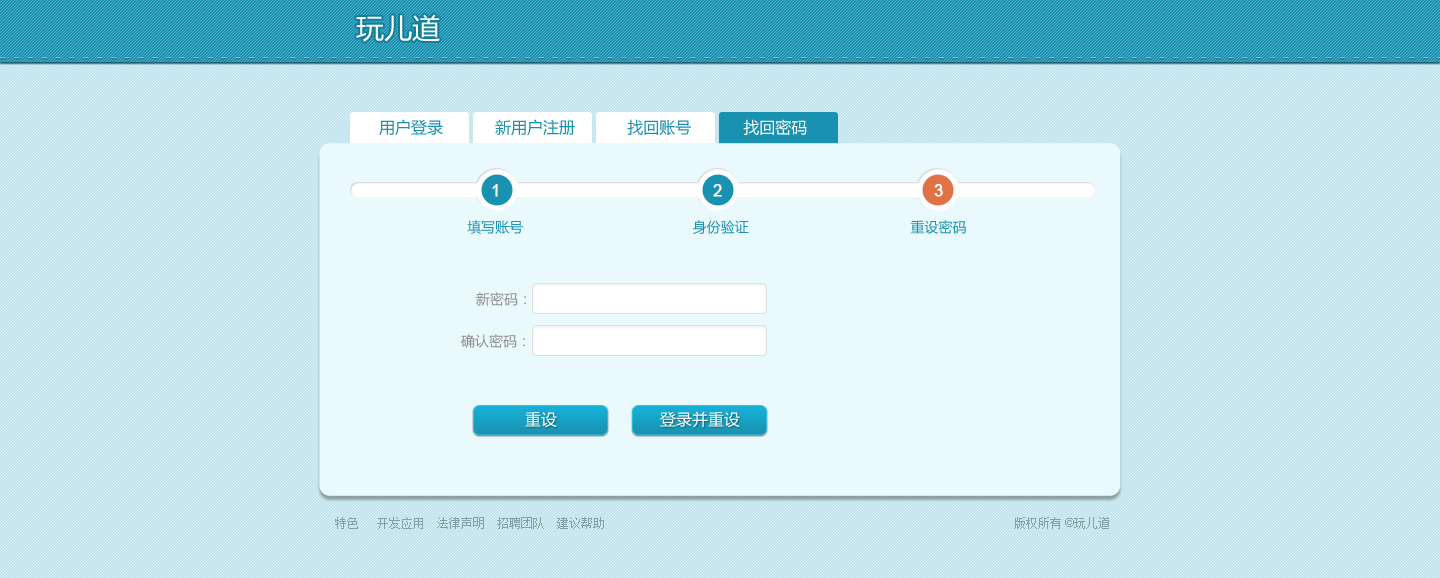
<style>
.page{position:relative;width:1440px;height:578px;background:#bfe4ed}
.page>*{position:absolute;margin:0}
.t1{font:28px "MicrosoftYaHei";color:#ffffff}
.t2{font:16px "MicrosoftYaHei";color:#1992b1}
.t3{font:16px "MicrosoftYaHei";color:#ffffff}
.t4{font:16px "ArialMT";color:#ffffff;font-weight:bold}
.t5{font:14px "MicrosoftYaHei";color:#1992b1}
.t6{font:14px "MicrosoftYaHei";color:#8e8e8e}
.t7{font:12px "SimSun";color:#849fa6}
.t8{font:12px "ArialMT";color:#849fa6}
</style>
<div class="page">
<p class="t1" style="left:356px;top:14px;width:84px;height:28px">玩儿道</p>
<p class="t2" style="left:379px;top:119px;width:428px;height:17px">用户登录           新用户注册           找回账号           <span class="t3">找回密码</span></p>
<p class="t4" style="left:492px;top:184px;width:6px;height:13px">1</p>
<p class="t4" style="left:713px;top:184px;width:9px;height:13px">2</p>
<p class="t4" style="left:934px;top:184px;width:9px;height:13px">3</p>
<p class="t5" style="left:467px;top:220px;width:499px;height:14px">填写账号                                         身份验证                                       重设密码</p>
<p class="t6" style="left:476px;top:292px;width:50px;height:14px">新密码：</p>
<p class="t6" style="left:461px;top:334px;width:64px;height:14px">确认密码：</p>
<p class="t3" style="left:525px;top:412px;width:32px;height:16px">重设</p>
<p class="t3" style="left:660px;top:411px;width:80px;height:17px">登录并重设</p>
<p class="t7" style="left:335px;top:517px;width:269px;height:12px">特色   开发应用  法律声明  招聘团队  建议帮助</p>
<p class="t7" style="left:1014px;top:517px;width:95px;height:12px">版权所有<span class="t8"> ©</span>玩儿道</p>
</div>
